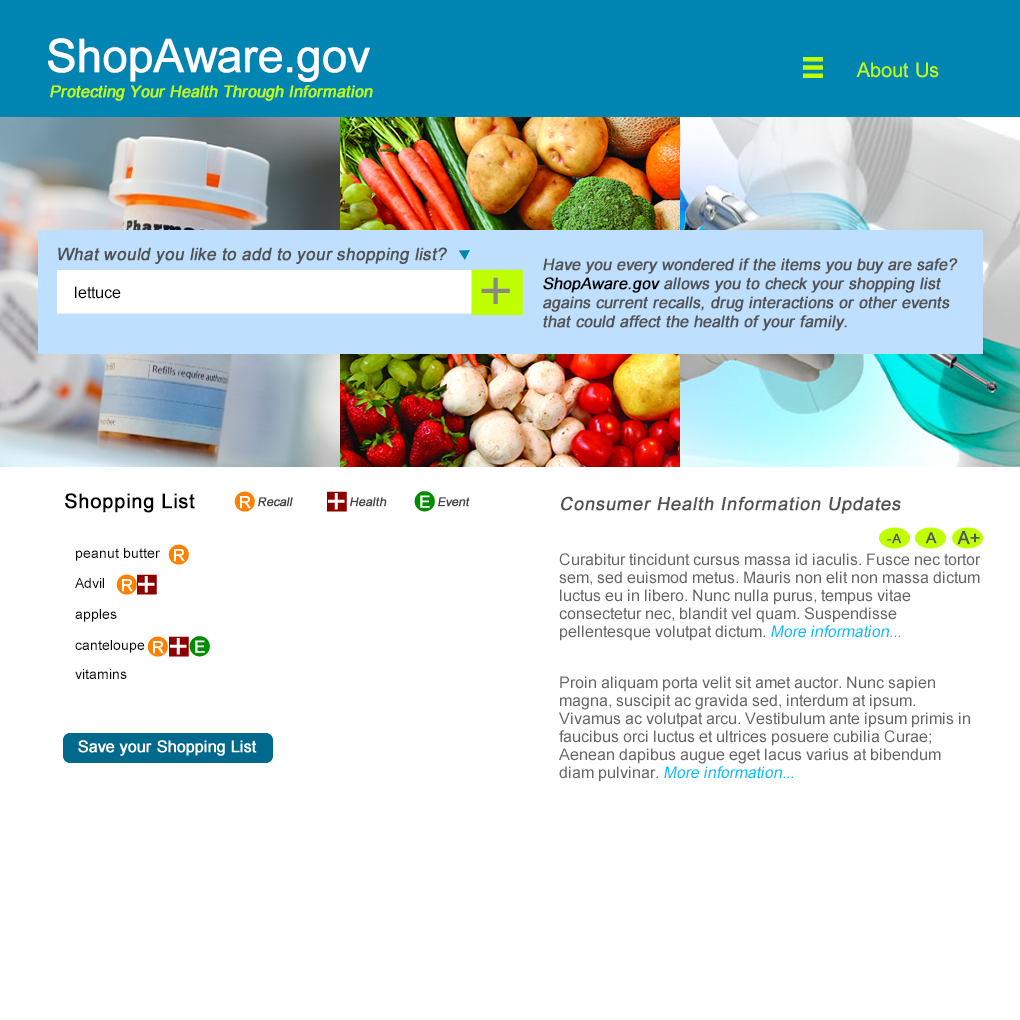
<style>
.page{position:relative;width:1020px;height:1020px;background:#ffffff}
.page>*{position:absolute;margin:0}
.t1{font:46px "ArialMT";letter-spacing:-0.03em;color:#ffffff;font-weight:bold}
.t2{font:20px "ArialMT";color:#bfff00}
.t3{font:16px "ArialMT";color:#bfff00;font-weight:bold;font-style:italic}
.t4{font:17px "ArialMT";color:#535353;font-weight:bold;font-style:italic}
.t5{font:16px/19.2px "ArialMT";color:#545454;font-weight:bold;font-style:italic}
.t6{font:16px/19.2px "ArialMT";color:#000000;font-weight:bold;font-style:italic}
.t7{font:16px "ArialMT";color:#000000}
.t8{font:20px "ArialMT";color:#000000;font-weight:bold}
.t9{font:12px "ArialMT";color:#444444;font-weight:bold;font-style:italic}
.t10{font:18px "ArialMT";color:#525252;font-weight:bold;font-style:italic}
.t11{font:13px "ArialMT";color:#555555;font-weight:bold}
.t12{font:15px "ArialMT";color:#555555;font-weight:bold}
.t13{font:18px "ArialMT";letter-spacing:-0.008em;color:#555555;font-weight:bold}
.t14{font:14px "ArialMT";color:#000000}
.t15{font:16px/18px "ArialMT";color:#666666}
.t16{font:16px/18px "ArialMT";color:#00bfff;font-style:italic}
</style>
<div class="page">
<p class="t1" style="left:48px;top:38px;width:322px;height:44px">ShopAware.gov</p>
<p class="t2" style="left:856px;top:62px;width:83px;height:16px">About Us</p>
<p class="t3" style="left:50px;top:85px;width:323px;height:16px">Protecting Your Health Through Information</p>
<p class="t4" style="left:58px;top:247px;width:389px;height:17px">What would you like to add to your shopping list?</p>
<p class="t5" style="left:543px;top:258px;width:415px;height:73px">Have you every wondered if the items you buy are safe? <span class="t6">ShopAware.gov</span> allows you to check your shopping list agains current recalls, drug interactions or other events that could affect the health of your family.</p>
<p class="t7" style="left:75px;top:286px;width:46px;height:13px">lettuce</p>
<p class="t8" style="left:65px;top:493px;width:130px;height:20px">Shopping List</p>
<p class="t9" style="left:258px;top:497px;width:35px;height:10px">Recall</p>
<p class="t9" style="left:350px;top:497px;width:37px;height:10px">Health</p>
<p class="t9" style="left:438px;top:497px;width:32px;height:10px">Event</p>
<p class="t10" style="left:561px;top:496px;width:340px;height:18px">Consumer Health Information Updates</p>
<p class="t11" style="left:887px;top:533px;width:15px;height:11px">-A</p>
<p class="t12" style="left:925px;top:532px;width:12px;height:12px">A</p>
<p class="t13" style="left:957px;top:531px;width:23px;height:14px">A+</p>
<p class="t14" style="left:76px;top:548px;width:84px;height:13px">peanut butter</p>
<p class="t15" style="left:559px;top:553px;width:422px;height:88px">Curabitur tincidunt cursus massa id iaculis. Fusce nec tortor sem, sed euismod metus. Mauris non elit non massa dictum luctus eu in libero. Nunc nulla purus, tempus vitae consectetur nec, blandit vel quam. Suspendisse pellentesque volutpat dictum. <span class="t16">More information...</span></p>
<p class="t14" style="left:75px;top:578px;width:29px;height:10px">Advil</p>
<p class="t14" style="left:75px;top:609px;width:42px;height:13px">apples</p>
<p class="t14" style="left:75px;top:640px;width:70px;height:13px">canteloupe</p>
<p class="t14" style="left:75px;top:669px;width:52px;height:10px">vitamins</p>
<p class="t15" style="left:559px;top:676px;width:411px;height:106px">Proin aliquam porta velit sit amet auctor. Nunc sapien magna, suscipit ac gravida sed, interdum at ipsum. Vivamus ac volutpat arcu. Vestibulum ante ipsum primis in faucibus orci luctus et ultrices posuere cubilia Curae; Aenean dapibus augue eget lacus varius at bibendum diam pulvinar. <span class="t16">More information...</span></p>
</div>
